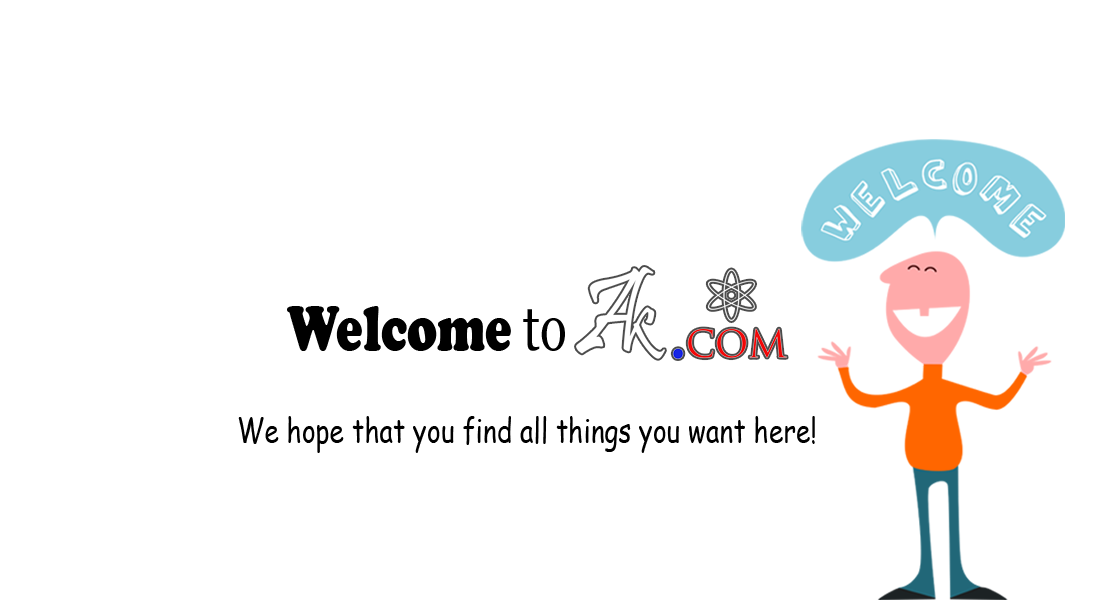
<style>
.page{position:relative;width:1100px;height:600px;background:#ffffff}
.page>*{position:absolute;margin:0}
.t1{font:64.9px "CooperBlack";color:#000000;scale:0.76 1}
.t2{font:64.9px "Vani";color:#000000;scale:0.76 1}
.t3{font:34.4px "ComicSansMS";color:#000000;scale:0.76 1}
</style>
<div class="page">
<p class="t1" style="left:287px;top:306px;width:278px;height:45px">Welcome<span class="t2"> to</span></p>
<p class="t3" style="left:238px;top:416px;width:577px;height:37px">We hope that you find all things you want here!</p>
</div>
